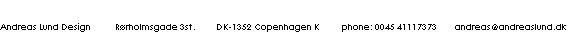
<style>
.page{position:relative;width:567px;height:34px;background:#ffffff}
.page>*{position:absolute;margin:0}
.t1{font:9px "CenturyGothic";color:#000000}
</style>
<div class="page">
<p class="t1" style="left:0px;top:23px;width:566px;height:9px">Andreas Lund Design            Rørholmsgade 3st.          DK-1352 Copenhagen K           phone: 0045 41117373         andreas@andreaslund.dk</p>
</div>
